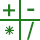
<style>
.page{position:relative;width:40px;height:40px;background:#ffffff}
.page>*{position:absolute;margin:0}
.t1{font:24px "Mangal";letter-spacing:-0.01em;color:#1f7d1d}
</style>
<div class="page">
<p class="t1" style="left:3px;top:4px;width:12px;height:13px">+</p>
<p class="t1" style="left:27px;top:8px;width:8px;height:3px">-</p>
<p class="t1" style="left:5px;top:25px;width:9px;height:10px">*</p>
<p class="t1" style="left:27px;top:21px;width:7px;height:19px">/</p>
</div>
